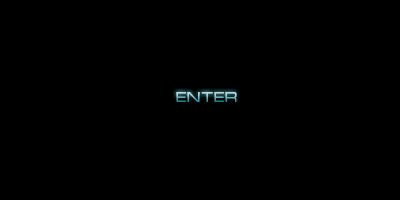
<style>
.page{position:relative;width:400px;height:200px;background:#000000}
.page>*{position:absolute;margin:0}
.t1{font:14px "MicrogrammaDOT-MedExt";letter-spacing:0.1em}
</style>
<div class="page">
<p class="t1" style="left:176px;top:92px;width:61px;height:10px">ENTER</p>
<p class="t1" style="left:176px;top:92px;width:61px;height:10px">ENTER</p>
</div>
